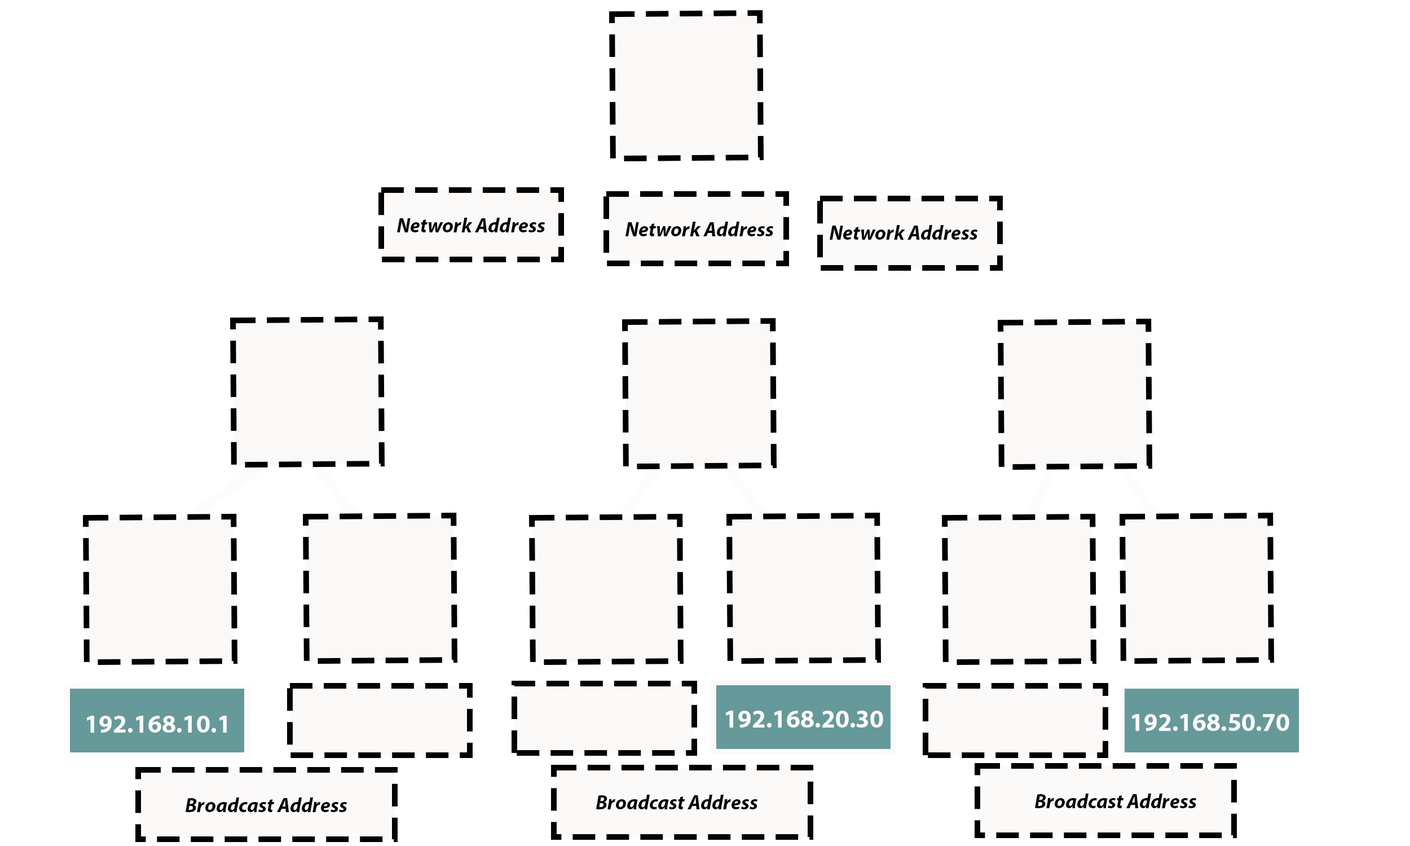
<style>
.page{position:relative;width:1410px;height:846px;background:#ffffff}
.page>*{position:absolute;margin:0}
.t1{font:20.3px "MyriadPro-BoldIt";color:#040303}
.t2{font:25.4px "MyriadPro-Bold";color:#fbf9f9}
</style>
<div class="page">
<p class="t1" style="left:397px;top:218px;width:148px;height:14px">Network Address</p>
<p class="t1" style="left:625px;top:222px;width:149px;height:14px">Network Address</p>
<p class="t1" style="left:829px;top:225px;width:149px;height:15px">Network Address</p>
<p class="t2" style="left:725px;top:711px;width:158px;height:16px">192.168.20.30</p>
<p class="t2" style="left:1131px;top:714px;width:158px;height:17px">192.168.50.70</p>
<p class="t2" style="left:86px;top:716px;width:141px;height:17px">192.168.10.1</p>
<p class="t1" style="left:186px;top:797px;width:161px;height:15px">Broadcast Address</p>
<p class="t1" style="left:596px;top:795px;width:162px;height:14px">Broadcast Address</p>
<p class="t1" style="left:1035px;top:793px;width:162px;height:15px">Broadcast Address</p>
</div>
